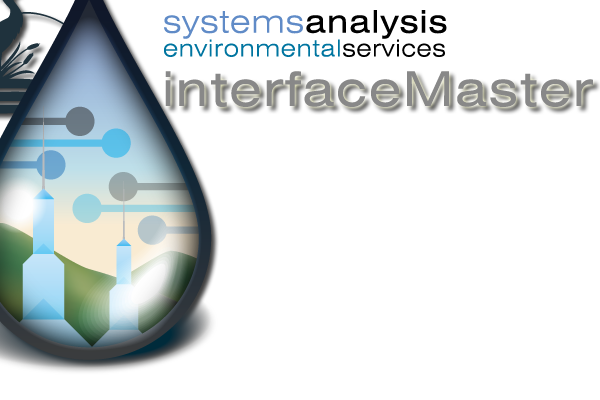
<style>
.page{position:relative;width:600px;height:400px;background:#ffffff}
.page>*{position:absolute;margin:0}
.t1{font:31.4px "Swiss721BT-RomanExtended";letter-spacing:0.04em;color:#000000}
.t2{font:31.4px "Swiss721BT-LightExtended";letter-spacing:0.04em;color:#608bc7}
.t3{font:23.2px "Swiss721BT-LightExtended";letter-spacing:0.04em;color:#0075a0}
.t4{font:23.2px "Swiss721BT-LightExtended";letter-spacing:0.04em;color:#000000}
.t5{font:48px "Swiss721BT-RomanExtended";letter-spacing:0.04em;color:#888888}
</style>
<div class="page">
<p class="t1" style="left:164px;top:10px;width:283px;height:29px"><span class="t2">systems</span>analysis</p>
<p class="t3" style="left:164px;top:39px;width:281px;height:18px">environmental<span class="t4">services</span></p>
<p class="t5" style="left:165px;top:71px;width:428px;height:36px">interfaceMaster</p>
</div>
